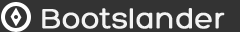
<style>
.page{position:relative;width:240px;height:32px;background:#333333}
.page>*{position:absolute;margin:0}
.t1{font:30px "Hero";color:#f3f3f3;font-weight:bold}
</style>
<div class="page">
<p class="t1" style="left:42px;top:8px;width:183px;height:21px">Bootslander</p>
</div>
